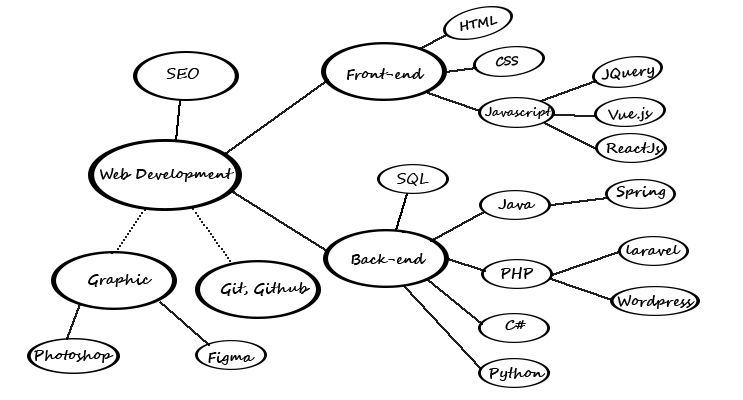
<style>
.page{position:relative;width:743px;height:400px;background:#ffffff}
.page>*{position:absolute;margin:0}
.t1{font:12px "SegoeScript-Bold";color:#000000}
.t2{font:15px "SegoeScript";color:#000000}
.t3{font:14px "SegoeScript-Bold";color:#000000}
</style>
<div class="page">
<p class="t1" style="left:460px;top:15px;width:38px;height:17px;rotate:-11deg">HTML</p>
<p class="t1" style="left:495px;top:56px;width:24px;height:11px;rotate:-4deg">CSS</p>
<p class="t2" style="left:166px;top:68px;width:33px;height:11px">SEO</p>
<p class="t3" style="left:347px;top:68px;width:78px;height:12px">Front-end</p>
<p class="t3" style="left:601px;top:67px;width:54px;height:13px;rotate:-7deg">JQuery</p>
<p class="t1" style="left:485px;top:107px;width:68px;height:12px">Javascript</p>
<p class="t3" style="left:608px;top:107px;width:45px;height:15px;rotate:-3deg">Vue.js</p>
<p class="t3" style="left:606px;top:142px;width:58px;height:13px">ReactJs</p>
<p class="t3" style="left:100px;top:168px;width:134px;height:14px">Web Development</p>
<p class="t2" style="left:397px;top:173px;width:32px;height:13px">SQL</p>
<p class="t3" style="left:616px;top:186px;width:50px;height:13px">Spring</p>
<p class="t3" style="left:498px;top:199px;width:38px;height:11px">Java</p>
<p class="t3" style="left:626px;top:245px;width:55px;height:11px">laravel</p>
<p class="t3" style="left:351px;top:253px;width:75px;height:12px">Back-end</p>
<p class="t3" style="left:501px;top:267px;width:33px;height:12px">PHP</p>
<p class="t3" style="left:88px;top:274px;width:64px;height:13px">Graphic</p>
<p class="t3" style="left:220px;top:282px;width:90px;height:14px">Git, Github</p>
<p class="t3" style="left:617px;top:295px;width:78px;height:14px">Wordpress</p>
<p class="t3" style="left:505px;top:320px;width:21px;height:10px">C#</p>
<p class="t3" style="left:34px;top:350px;width:80px;height:13px">Photoshop</p>
<p class="t3" style="left:208px;top:352px;width:47px;height:13px">Figma</p>
<p class="t3" style="left:489px;top:367px;width:57px;height:14px">Python</p>
</div>
